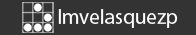
<style>
.page{position:relative;width:196px;height:35px;background:#333333}
.page>*{position:absolute;margin:0}
.t1{font:21px "MyriadPro-Regular";color:#ffffff}
</style>
<div class="page">
<p class="t1" style="left:58px;top:9px;width:120px;height:19px">lmvelasquezp</p>
</div>
